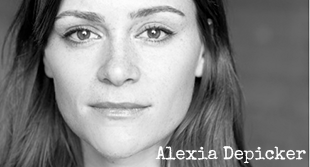
<style>
.page{position:relative;width:310px;height:167px}
.page>*{position:absolute;margin:0}
.t1{font:18px "SpecialElite-Regular";color:#ffffff}
</style>
<div class="page">
<p class="t1" style="left:155px;top:146px;width:151px;height:18px">Alexia Depicker</p>
</div>
